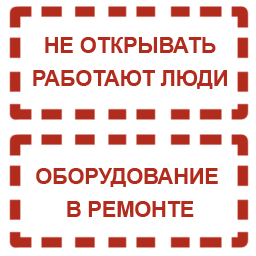
<style>
.page{position:relative;width:256px;height:256px;background:#ffffff}
.page>*{position:absolute;margin:0}
.t1{font:37px/32.5px "Arial-BoldMT";color:#b22c1d}
</style>
<div class="page">
<p class="t1" style="left:33px;top:37px;width:194px;height:52px;text-align:center">НЕ ОТКРЫВАТЬ<br>РАБОТАЮТ ЛЮДИ</p>
<p class="t1" style="left:36px;top:168px;width:182px;height:49px;text-align:center">ОБОРУДОВАНИЕ <br>В РЕМОНТЕ</p>
</div>
